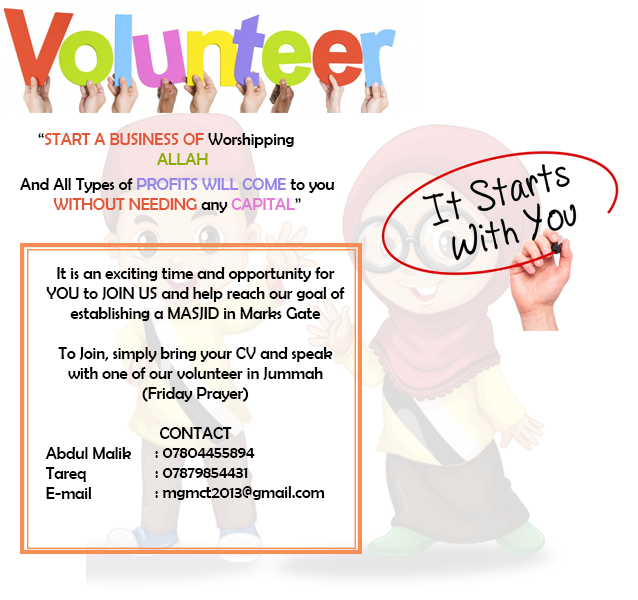
<style>
.page{position:relative;width:638px;height:600px;background:#ffffff}
.page>*{position:absolute;margin:0}
.t1{font:12px "BerlinSansFB-Reg";color:#e35638}
.t2{font:12px "BerlinSansFB-Reg";color:#000000}
.t3{font:12px "BerlinSansFB-Reg";color:#8dad03}
.t4{font:12px "BerlinSansFB-Reg";color:#9485ea}
.t5{font:12px "BerlinSansFB-Reg";color:#e25537}
.t6{font:12px "BerlinSansFB-Reg";color:#e679d6}
</style>
<div class="page">
<p class="t1" style="left:38px;top:133px;width:256px;height:15px"><span class="t2">“</span>START A BUSINESS OF<span class="t2"> Worshipping</span></p>
<p class="t3" style="left:157px;top:153px;width:51px;height:12px">ALLAH</p>
<p class="t4" style="left:20px;top:178px;width:315px;height:35px;text-align:center"><span class="t2">And All Types of </span>PROFITS WILL COME<span class="t2"> to you<br></span><span class="t5">WITHOUT NEEDING</span><span class="t2"> any </span><span class="t6">CAPITAL</span><span class="t2">”</span></p>
<p class="t2" style="left:45px;top:267px;width:300px;height:232px;text-align:center">It is an exciting time and opportunity for YOU to JOIN US and help reach our goal of establishing a MASJID in Marks Gate<br><br>To Join, simply bring your CV and speak with one of our volunteer in Jummah (Friday Prayer)<br><br>CONTACT<br>Abdul Malik<br>Tareq<br>E-mail</p>
<p class="t2" style="left:155px;top:448px;width:170px;height:52px;text-align:right">: 07804455894<br>: 07879854431<br>: mgmct2013@gmail.com</p>
</div>
